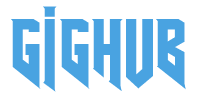
<style>
.page{position:relative;width:200px;height:100px;background:#ffffff}
.page>*{position:absolute;margin:0}
.t1{font:90px "AmazDooMRight2";letter-spacing:0.025em;color:#4aa3e2;text-transform:uppercase}
</style>
<div class="page">
<p class="t1" style="left:11px;top:6px;width:175px;height:86px">GigHub</p>
</div>
